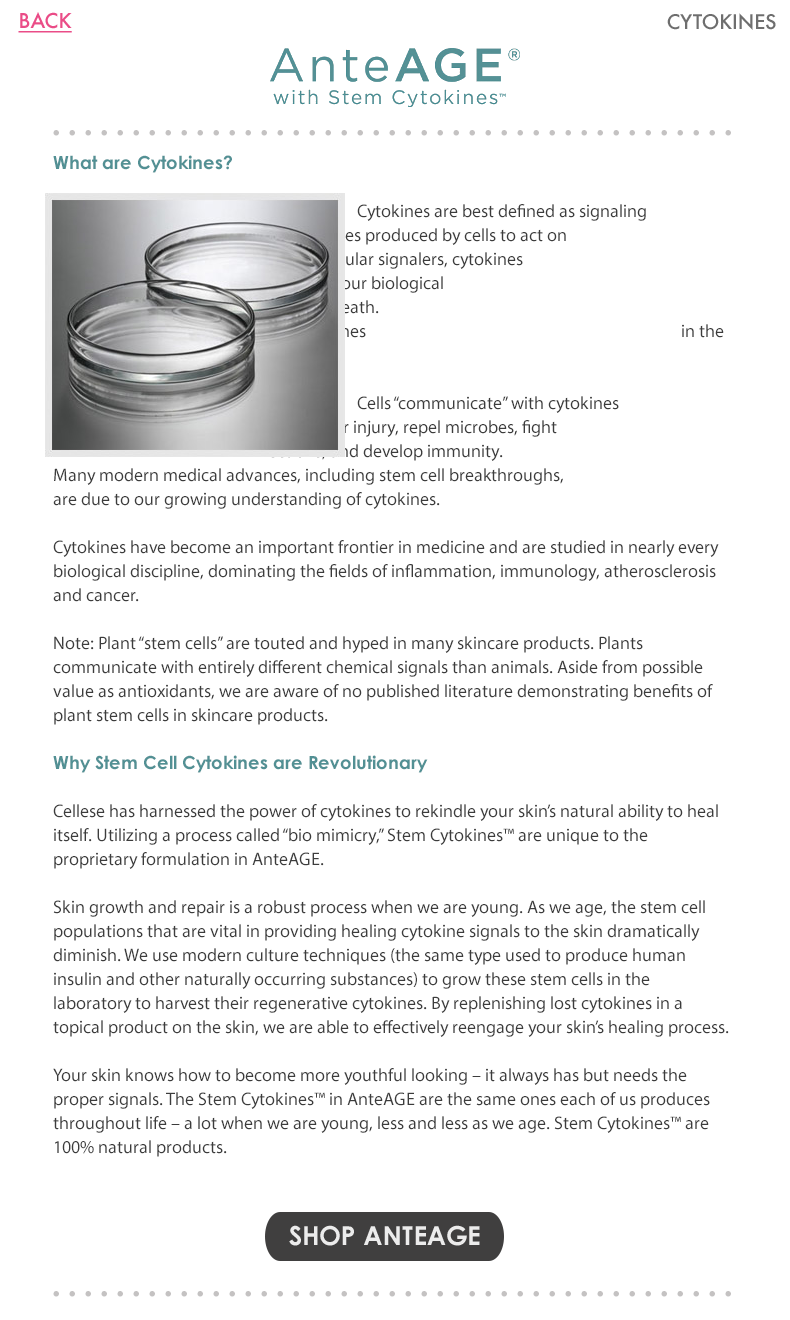
<style>
.page{position:relative;width:790px;height:1320px;background:#ffffff}
.page>*{position:absolute;margin:0}
.t1{font:20px "Futura-Medium";color:#ea4c87;text-decoration:underline}
.t2{font:19.5px "Futura-Medium";color:#6e6e6e}
.t3{font:40px "Futura-Medium";letter-spacing:0.1em;color:#c4c2c2}
.t4{font:18px/24px "MyriadPro-Regular";color:#3c3c3c}
.t5{font:18px/24px "CenturyGothic-Bold";color:#529094}
.t6{font:26px "CenturyGothic-Bold";color:#ececec}
</style>
<div class="page">
<p class="t1" style="left:18px;top:12px;width:54px;height:21px">BACK</p>
<p class="t2" style="left:667px;top:13px;width:109px;height:17px">CYTOKINES</p>
<p class="t3" style="left:53px;top:130px;width:678px;height:6px">...........................................</p>
<p class="t4" style="left:53px;top:155px;width:676px;height:1002px"><span class="t5">What are Cytokines?<br></span><br>            Cytokines are best defined as signaling              molecules produced by cells to act on              other cells. As cellular signalers, cytokines              influence and control our biological               processes from conception to death.               There are hundreds of unique cytokines              in the human body.<br><br>            Cells “communicate” with cytokines              to repair injury, repel microbes, fight               infections, and develop immunity.<br>Many modern medical advances, including stem cell breakthroughs,<br>are due to our growing understanding of cytokines.<br><br>Cytokines have become an important frontier in medicine and are studied in nearly every biological discipline, dominating the fields of inflammation, immunology, atherosclerosis and cancer.<br><br>Note: Plant “stem cells” are touted and hyped in many skincare products. Plants communicate with entirely different chemical signals than animals. Aside from possible value as antioxidants, we are aware of no published literature demonstrating benefits of plant stem cells in skincare products.  <br><br><span class="t5">Why Stem Cell Cytokines are Revolutionary<br></span><br>Cellese has harnessed the power of cytokines to rekindle your skin’s natural ability to heal itself. Utilizing a process called “bio mimicry,” Stem Cytokines™ are unique to the proprietary formulation in AnteAGE.<br><br>Skin growth and repair is a robust process when we are young. As we age, the stem cell populations that are vital in providing healing cytokine signals to the skin dramatically diminish. We use modern culture techniques (the same type used to produce human insulin and other naturally occurring substances) to grow these stem cells in the laboratory to harvest their regenerative cytokines. By replenishing lost cytokines in a topical product on the skin, we are able to effectively reengage your skin’s healing process.<br><br>Your skin knows how to become more youthful looking – it always has but needs the proper signals. The Stem Cytokines™ in AnteAGE are the same ones each of us produces throughout life – a lot when we are young, less and less as we age. Stem Cytokines™ are 100% natural products.</p>
<p class="t6" style="left:289px;top:1225px;width:191px;height:21px">SHOP ANTEAGE</p>
<p class="t3" style="left:53px;top:1291px;width:678px;height:6px">...........................................</p>
</div>
